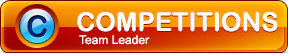
<style>
.page{position:relative;width:288px;height:54px}
.page>*{position:absolute;margin:0}
.t1{font:30px "ArialRoundedMTBold";text-transform:uppercase}
.t2{font:26px "ArialRoundedMTBold";color:#ffffff;text-transform:uppercase}
.t3{font:12px "ArialMT";color:#ffffff}
</style>
<div class="page">
<p class="t1" style="left:27px;top:15px;width:20px;height:23px">C</p>
<p class="t2" style="left:77px;top:12px;width:201px;height:20px">Competitions</p>
<p class="t3" style="left:79px;top:35px;width:71px;height:10px">Team Leader</p>
</div>
